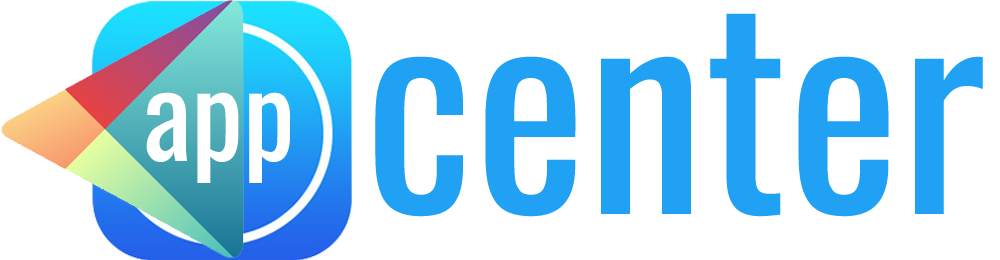
<style>
.page{position:relative;width:1000px;height:260px;background:#ffffff}
.page>*{position:absolute;margin:0}
.t1{font:268px "Oswald-Regular";color:#20a1f4}
.t2{font:116px "Oswald-Regular";color:#ffffff}
</style>
<div class="page">
<p class="t1" style="left:375px;top:13px;width:608px;height:204px">center</p>
<p class="t2" style="left:146px;top:92px;width:144px;height:91px">app</p>
</div>
